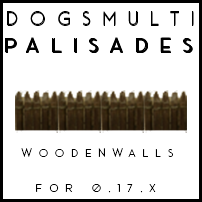
<style>
.page{position:relative;width:202px;height:202px;background:#ffffff}
.page>*{position:absolute;margin:0}
.t1{font:20.1px "AceSansDemo";letter-spacing:0.58em;color:#000000}
.t2{font:21.1px "AceSansDemo";letter-spacing:0.58em;color:#000000}
.t3{font:12px "AceSansDemo";letter-spacing:0.58em;color:#000000}
</style>
<div class="page">
<p class="t1" style="left:7px;top:11px;width:187px;height:14px">DOGSMULTI</p>
<p class="t1" style="left:7px;top:12px;width:187px;height:14px">DOGSMULTI</p>
<p class="t2" style="left:5px;top:37px;width:186px;height:15px">PALISADES</p>
<p class="t2" style="left:5px;top:38px;width:187px;height:15px">PALISADES</p>
<p class="t2" style="left:6px;top:38px;width:187px;height:15px">PALISADES</p>
<p class="t2" style="left:6px;top:38px;width:187px;height:15px">PALISADES</p>
<p class="t2" style="left:6px;top:37px;width:186px;height:15px">PALISADES</p>
<p class="t3" style="left:21px;top:148px;width:152px;height:9px">woodenwalls</p>
<p class="t3" style="left:36px;top:184px;width:120px;height:9px">FOR 0.17.X</p>
</div>
